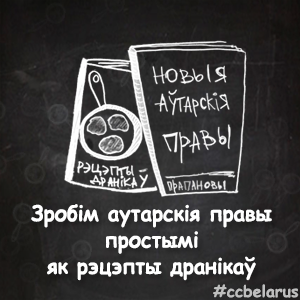
<style>
.page{position:relative;width:300px;height:300px}
.page>*{position:absolute;margin:0}
.t1{font:22px "ComicSansMS-Bold";color:#ffffff;scale:0.94 1}
.t2{font:16px "ComicSansMS-Bold";color:#bebebe}
</style>
<div class="page">
<p class="t1" style="left:31px;top:204px;width:241px;height:77px;text-align:center">Зробім аутарскія правы <br>простымі <br>як рэцэпты дранікаў</p>
<p class="t2" style="left:213px;top:284px;width:86px;height:14px">#ccbelarus</p>
</div>
